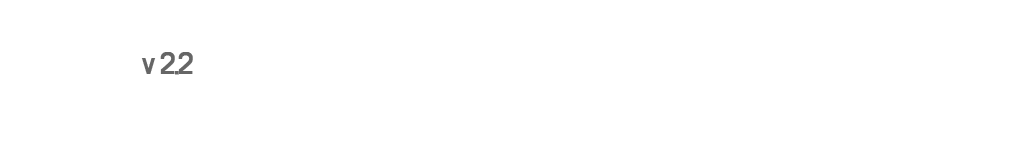
<style>
.page{position:relative;width:1024px;height:145px;background:#ffffff}
.page>*{position:absolute;margin:0}
.t1{font:25.3px "BMDoHyeon";letter-spacing:-0.075em;color:#666666}
</style>
<div class="page">
<p class="t1" style="left:141px;top:52px;width:52px;height:23px">v 2.2</p>
</div>
